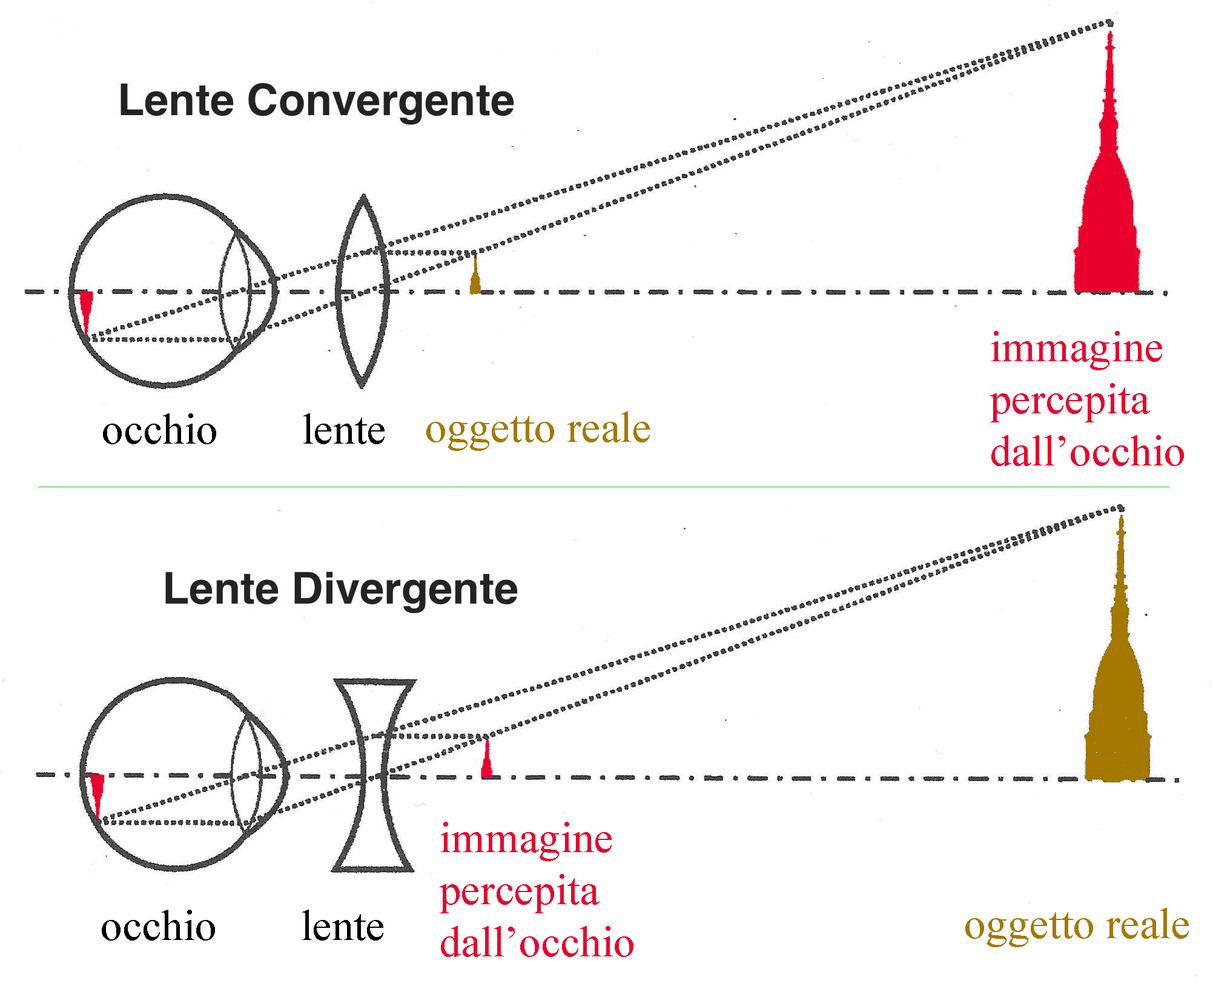
<style>
.page{position:relative;width:1213px;height:983px;background:#ffffff}
.page>*{position:absolute;margin:0}
.t1{font:43.6px "TimesNewRomanPSMT";color:#e9002d}
.t2{font:43.6px "TimesNewRomanPSMT";color:#000000}
.t3{font:43.6px "TimesNewRomanPSMT";color:#a57800}
</style>
<div class="page">
<p class="t1" style="left:991px;top:331px;width:193px;height:135px">immagine<br>percepita<br>dall’occhio</p>
<p class="t2" style="left:103px;top:413px;width:113px;height:31px">occhio</p>
<p class="t2" style="left:304px;top:413px;width:81px;height:31px">lente</p>
<p class="t3" style="left:427px;top:411px;width:223px;height:40px">oggetto reale</p>
<p class="t1" style="left:440px;top:822px;width:194px;height:135px">immagine<br>percepita<br>dall’occhio</p>
<p class="t2" style="left:102px;top:909px;width:113px;height:31px">occhio</p>
<p class="t2" style="left:302px;top:909px;width:81px;height:31px">lente</p>
<p class="t3" style="left:966px;top:908px;width:223px;height:39px">oggetto reale</p>
</div>
